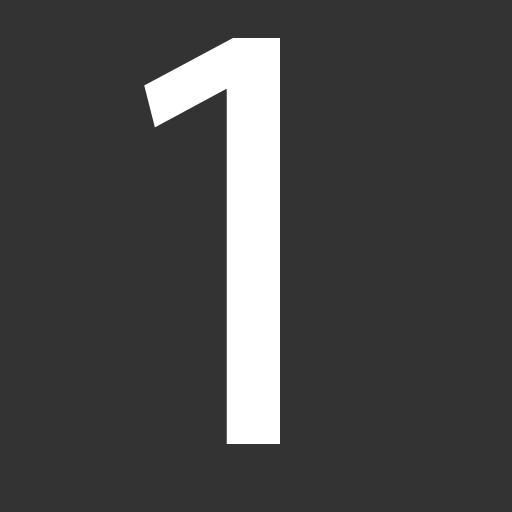
<style>
.page{position:relative;width:512px;height:512px;background:#333333}
.page>*{position:absolute;margin:0}
.t1{font:625px "MyriadPro-Regular";color:#ffffff}
</style>
<div class="page">
<p class="t1" style="left:144px;top:38px;width:136px;height:406px">1</p>
</div>
